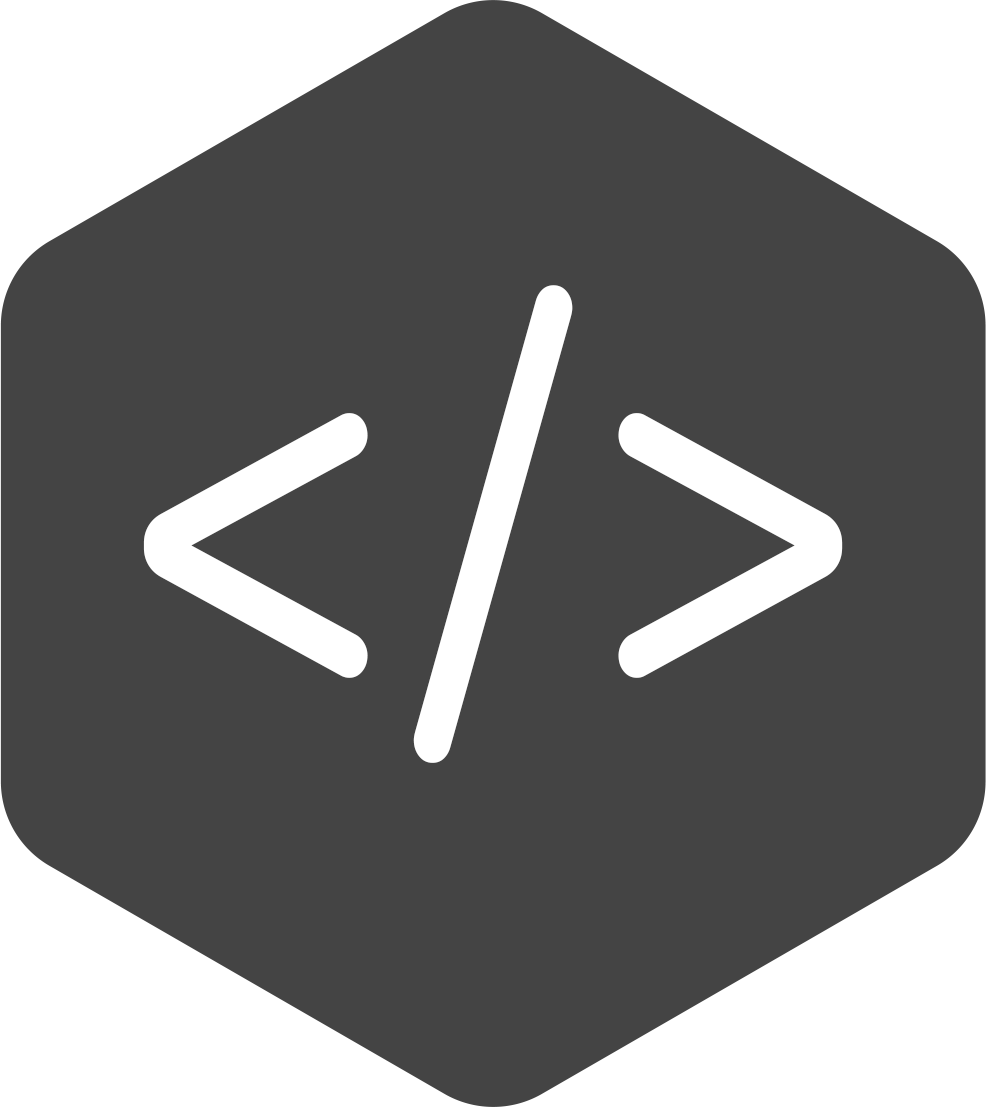
<style>
.page{position:relative;width:986px;height:1107px;background:#444444}
.page>*{position:absolute;margin:0}
.t1{font:555.9px "VarelaRound-Regular";color:#ffffff;scale:0.82 1}
</style>
<div class="page">
<p class="t1" style="left:143px;top:285px;width:700px;height:478px">&lt;/&gt;</p>
</div>
